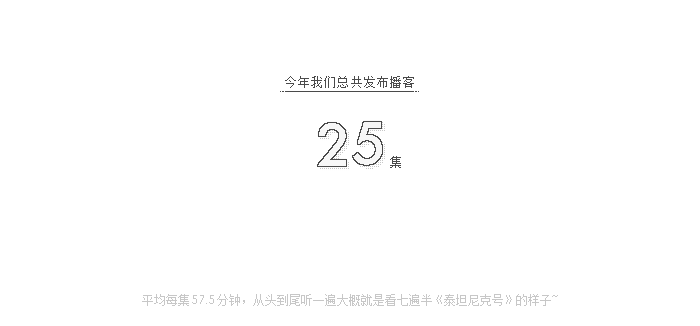
<style>
.page{position:relative;width:700px;height:326px;background:#ffffff}
.page>*{position:absolute;margin:0}
.t1{font:12px "FZXS12--GB1-0";letter-spacing:0.1em;color:#4a4a4a}
.t2{font:12px "FZXS12--GB1-0";color:#c7c7c7}
.t3{font:12px "Avenir-Book";color:#c7c7c7}
</style>
<div class="page">
<p class="t1" style="left:285px;top:76px;width:129px;height:12px">今年我们总共发布播客</p>
<p class="t1" style="left:390px;top:156px;width:11px;height:12px">集</p>
<p class="t2" style="left:142px;top:294px;width:416px;height:12px">平均每集<span class="t3">57.5</span>分钟，从头到尾听一遍大概就是看七遍半《泰坦尼克号》的样子~</p>
</div>
